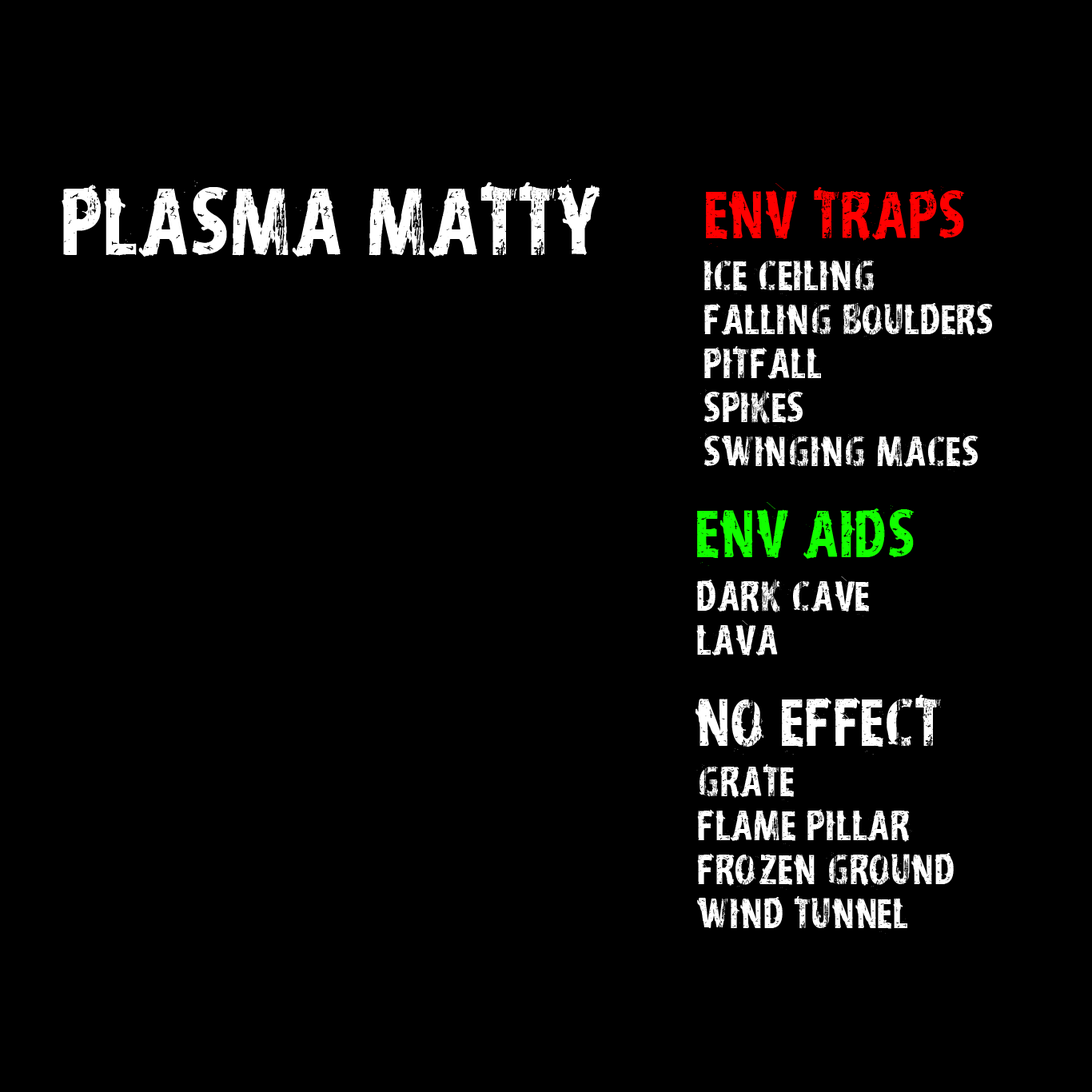
<style>
.page{position:relative;width:1092px;height:1092px;background:#000000}
.page>*{position:absolute;margin:0}
.t1{font:83.5px "vtksdistress";color:#ffffff}
.t2{font:58.4px "vtksdistress";color:#ff0000}
.t3{font:37.2px/44px "vtksdistress";color:#ffffff}
.t4{font:58.4px "vtksdistress";color:#12ff00}
.t5{font:58.4px "vtksdistress";color:#ffffff}
</style>
<div class="page">
<p class="t1" style="left:62px;top:179px;width:538px;height:78px">plasma matty</p>
<p class="t2" style="left:706px;top:183px;width:259px;height:64px">Env traps</p>
<p class="t3" style="left:700px;top:258px;width:293px;height:214px">ice ceiling<br>falling boulders<br>pitfall<br>spikes<br>swinging maces</p>
<p class="t4" style="left:697px;top:502px;width:218px;height:64px">ENV AIDs</p>
<p class="t3" style="left:696px;top:576px;width:173px;height:80px">dark cave<br>lava</p>
<p class="t5" style="left:695px;top:695px;width:246px;height:60px">No effect</p>
<p class="t3" style="left:696px;top:764px;width:258px;height:170px">grate<br>flame pillar<br>Frozen ground<br>Wind tunnel</p>
</div>
